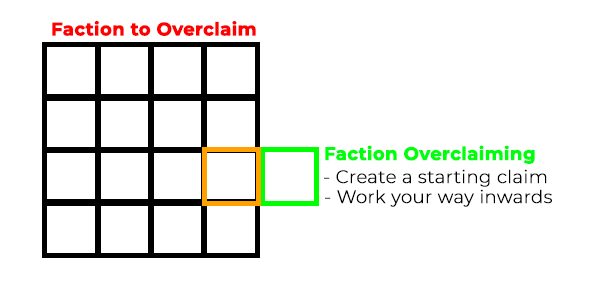
<style>
.page{position:relative;width:600px;height:300px;background:#ffffff}
.page>*{position:absolute;margin:0}
.t1{font:18px "Montserrat-Bold";color:#ff0000;font-weight:bold}
.t2{font:18px "Montserrat-Bold";color:#00ff0c;font-weight:bold}
.t3{font:18px "Montserrat-Light";color:#000000;font-weight:bold}
</style>
<div class="page">
<p class="t1" style="left:52px;top:20px;width:204px;height:16px">Faction to Overclaim</p>
<p class="t2" style="left:325px;top:145px;width:210px;height:19px">Faction Overclaiming</p>
<p class="t3" style="left:324px;top:169px;width:223px;height:18px">- Create a starting claim</p>
<p class="t3" style="left:325px;top:189px;width:227px;height:18px">- Work your way inwards</p>
</div>
